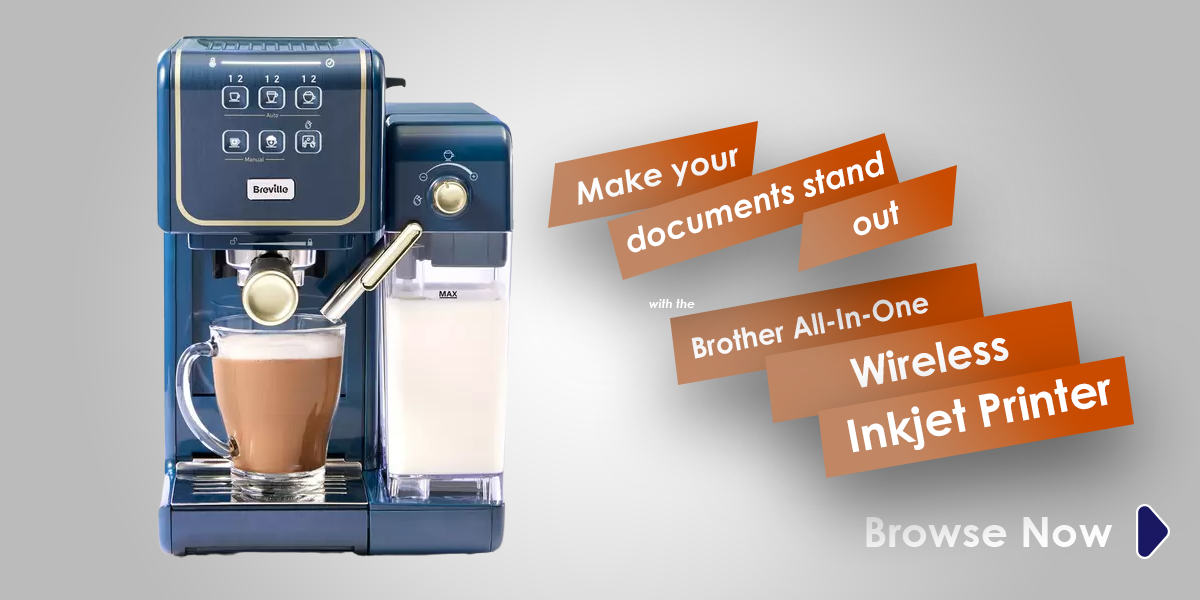
<style>
.page{position:relative;width:1200px;height:600px}
.page>*{position:absolute;margin:0}
.t1{font:31.2px "CenturyGothic-BoldItalic";color:#ffffff;scale:1.03 1}
.t2{font:32.3px "CenturyGothic-BoldItalic";color:#ffffff}
.t3{font:12.3px "CenturyGothic-BoldItalic";color:#ffffff}
.t4{font:28.7px "CenturyGothic-Bold";color:#ffffff}
.t5{font:41.4px "CenturyGothic-Bold";color:#ffffff}
.t6{font:45.4px "CenturyGothic-Bold";color:#ffffff}
.t7{font:42.4px "CenturyGothic-Bold";color:#ffffff}
</style>
<div class="page">
<p class="t1" style="left:578px;top:148px;width:160px;height:57px;rotate:-14deg">Make your</p>
<p class="t2" style="left:627px;top:150px;width:258px;height:103px;rotate:-18deg">documents stand</p>
<p class="t2" style="left:853px;top:200px;width:46px;height:36px;rotate:-18deg">out</p>
<p class="t3" style="left:649px;top:299px;width:46px;height:9px">with the</p>
<p class="t4" style="left:691px;top:297px;width:238px;height:62px;rotate:-11deg">Brother All-In-One</p>
<p class="t5" style="left:849px;top:338px;width:160px;height:50px;rotate:-11deg">Wireless</p>
<p class="t6" style="left:847px;top:378px;width:263px;height:75px;rotate:-11deg">Inkjet Printer</p>
<p class="t7" style="left:866px;top:517px;width:247px;height:30px">Browse Now</p>
</div>
